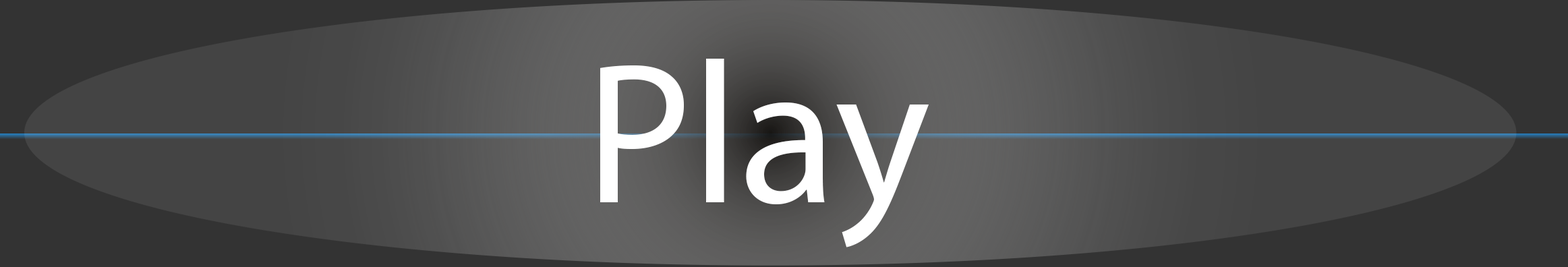
<style>
.page{position:relative;width:1568px;height:267px;background:#333333}
.page>*{position:absolute;margin:0}
.t1{font:202.3px "MyriadPro-Regular";color:#ffffff}
</style>
<div class="page">
<p class="t1" style="left:600px;top:59px;width:329px;height:189px">Play</p>
</div>
